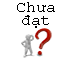
<style>
.page{position:relative;width:71px;height:58px;background:#ffffff}
.page>*{position:absolute;margin:0}
.t1{font:12px/13.3px "CourierNewPSMT";color:#000000}
</style>
<div class="page">
<p class="t1" style="left:17px;top:2px;width:38px;height:26px;text-align:center">Chưa<br>đạt</p>
</div>
